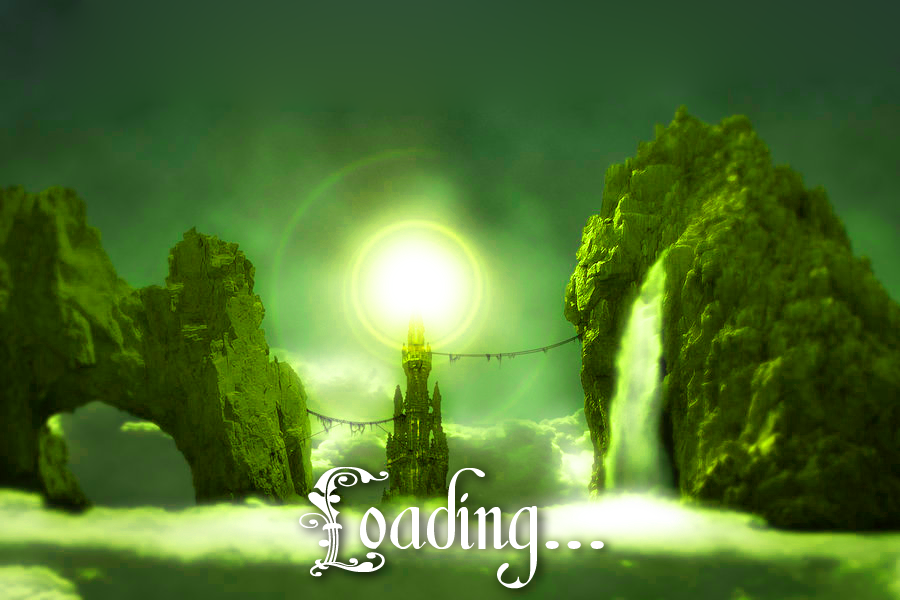
<style>
.page{position:relative;width:900px;height:600px}
.page>*{position:absolute;margin:0}
.t1{font:150px "Amadeus";color:#ffffff;scale:1.5 1}
</style>
<div class="page">
<p class="t1" style="left:299px;top:467px;width:305px;height:122px">Loading...</p>
</div>
